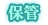
<style>
.page{position:relative;width:48px;height:25px}
.page>*{position:absolute;margin:0}
.t1{font:16px "RyuminPro-ExBold";color:#9cffed}
</style>
<div class="page">
<p class="t1" style="left:8px;top:5px;width:31px;height:16px">保管</p>
</div>
